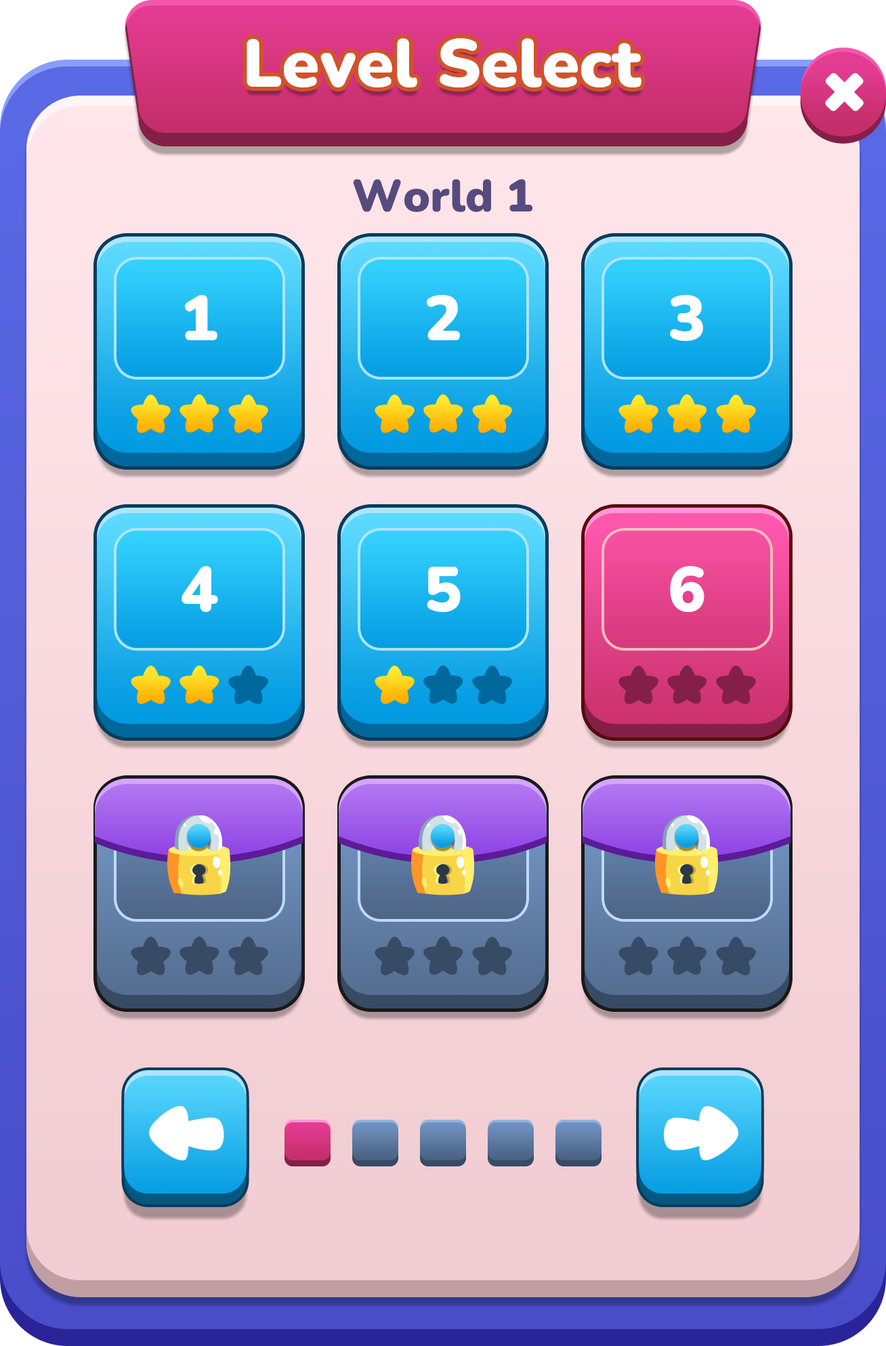
<style>
.page{position:relative;width:886px;height:1346px}
.page>*{position:absolute;margin:0}
.t1{font:67.8px "Nunito-Black";color:#ffffff}
.t2{font:45.2px "Nunito-Black";color:#554b7f}
.t3{font:63.2px "Nunito-Black";color:#ffffff}
</style>
<div class="page">
<p class="t1" style="left:247px;top:38px;width:395px;height:49px">Level Select</p>
<p class="t2" style="left:353px;top:179px;width:180px;height:33px">World 1</p>
<p class="t3" style="left:185px;top:295px;width:32px;height:45px">1</p>
<p class="t3" style="left:427px;top:295px;width:33px;height:45px">2</p>
<p class="t3" style="left:670px;top:295px;width:33px;height:46px">3</p>
<p class="t3" style="left:182px;top:566px;width:36px;height:46px">4</p>
<p class="t3" style="left:427px;top:566px;width:34px;height:46px">5</p>
<p class="t3" style="left:670px;top:566px;width:35px;height:46px">6</p>
</div>
